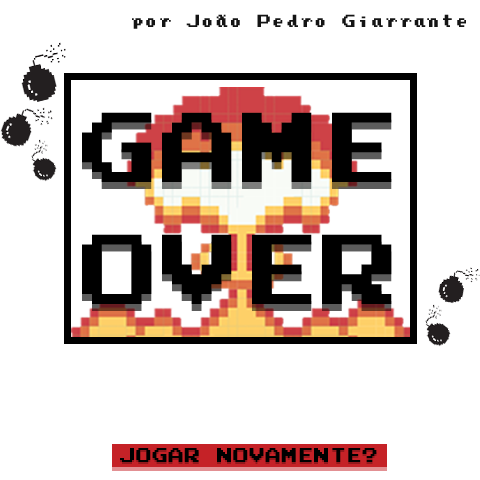
<style>
.page{position:relative;width:480px;height:480px;background:#ffffff}
.page>*{position:absolute;margin:0}
.t1{font:14px "PressStartReg";letter-spacing:0.01em;color:#141414}
.t2{font:79.2px/121.9px "PressStartReg";letter-spacing:0.01em;color:#000000}
.t3{font:16px "PressStartReg";letter-spacing:0.01em;color:#000000}
</style>
<div class="page">
<p class="t1" style="left:132px;top:14px;width:334px;height:15px">por João Pedro Giarrante</p>
<p class="t2" style="left:82px;top:112px;width:310px;height:192px;text-align:center">GAME<br>OVER</p>
<p class="t2" style="left:82px;top:119px;width:310px;height:192px;text-align:center;opacity:0.64">GAME<br>OVER</p>
<p class="t3" style="left:120px;top:448px;width:257px;height:14px">JOGAR NOVAMENTE?</p>
<p class="t3" style="left:120px;top:450px;width:257px;height:14px;opacity:0.36">JOGAR NOVAMENTE?</p>
</div>
